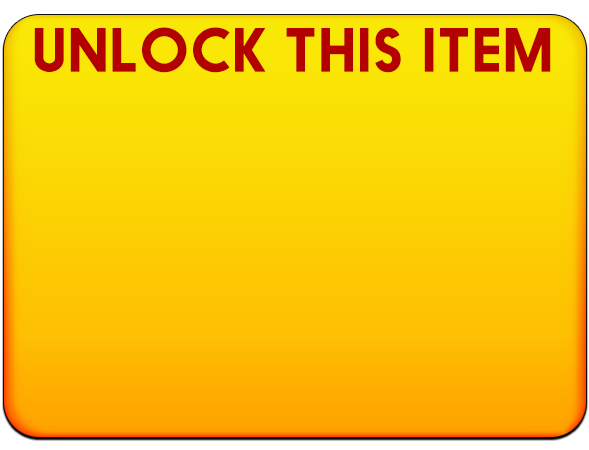
<style>
.page{position:relative;width:589px;height:450px}
.page>*{position:absolute;margin:0}
.t1{font:57.7px "Nanami";letter-spacing:-0.014em;color:#b30000;font-weight:bold}
</style>
<div class="page">
<p class="t1" style="left:34px;top:27px;width:517px;height:46px">UNLOCK THIS ITEM</p>
</div>
